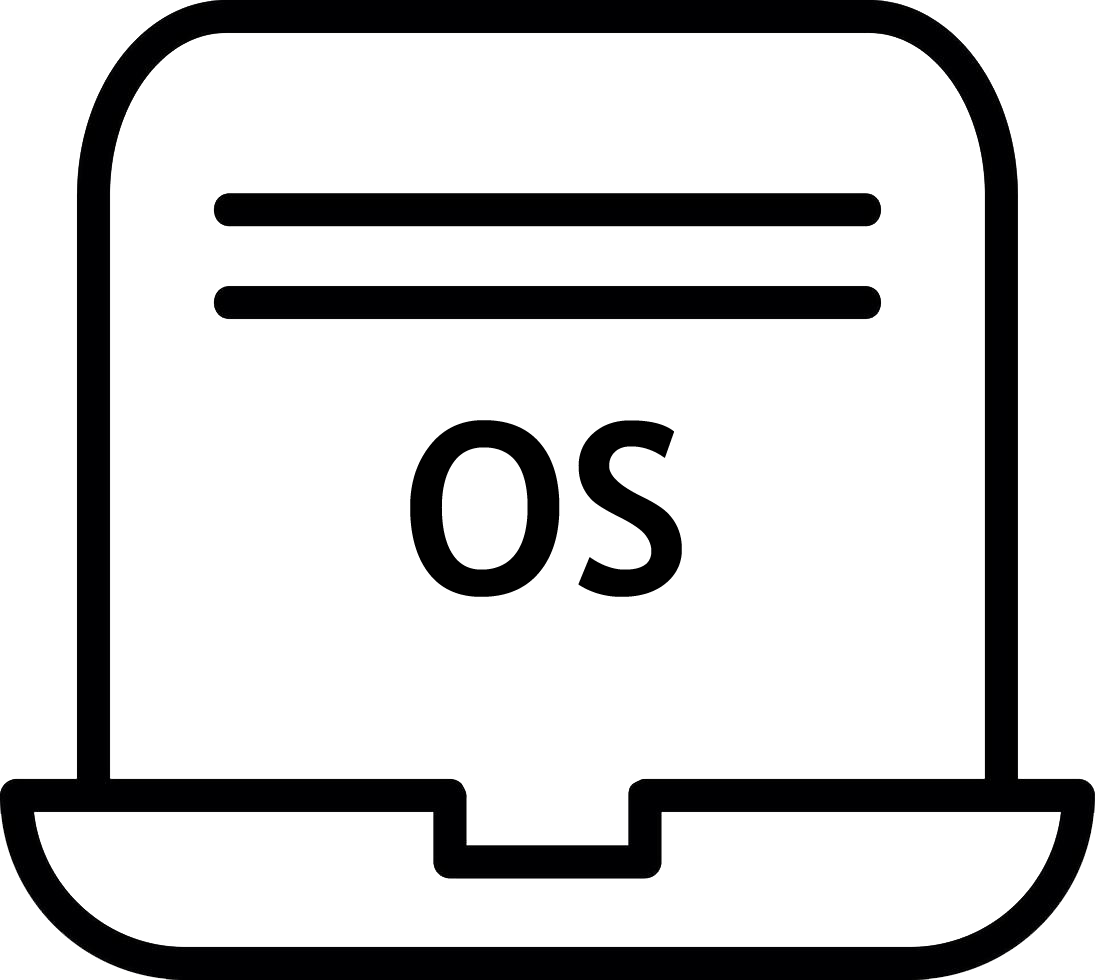
<style>
.page{position:relative;width:1095px;height:980px;background:#ffffff}
.page>*{position:absolute;margin:0}
.t1{font:238.4px "TrebuchetMS-Bold";color:#000000}
</style>
<div class="page">
<p class="t1" style="left:410px;top:420px;width:272px;height:177px">OS</p>
</div>
